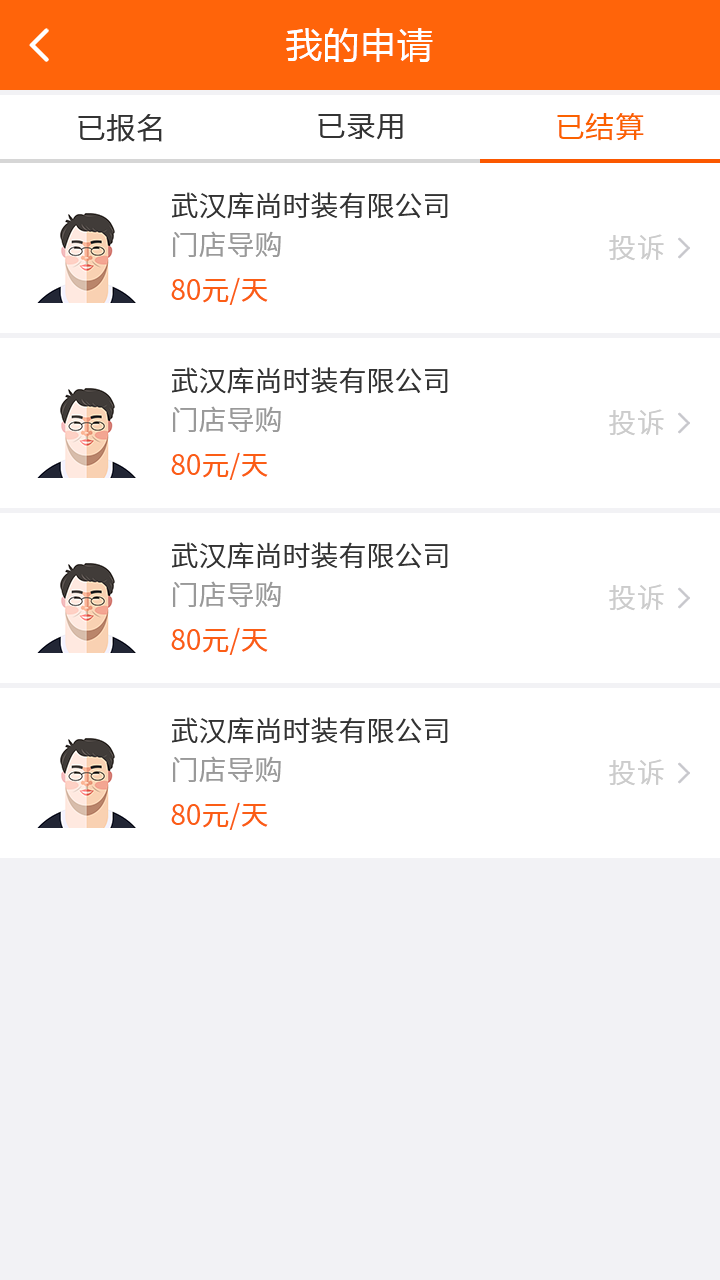
<style>
.page{position:relative;width:720px;height:1280px;background:#ffffff}
.page>*{position:absolute;margin:0}
.t1{font:36px "MicrosoftYaHei";letter-spacing:0.03em;color:#ffffff}
.t2{font:30px "NotoSansCJKsc-DemiLight";color:#333333;font-variant:small-caps}
.t3{font:30px "NotoSansCJKsc-DemiLight";color:#fb6100;font-variant:small-caps}
.t4{font:28px "NotoSansCJKsc-DemiLight";color:#333333;font-variant:small-caps}
.t5{font:28px "NotoSansCJKsc-DemiLight";color:#999999;font-variant:small-caps}
.t6{font:28px "NotoSansCJKsc-DemiLight";letter-spacing:0.03em;color:#cccccc;font-variant:small-caps}
.t7{font:28px "NotoSansCJKsc-Regular";color:#fb5d15;font-variant:small-caps}
</style>
<div class="page">
<p class="t1" style="left:286px;top:28px;width:147px;height:34px">我的申请</p>
<p class="t2" style="left:318px;top:113px;width:85px;height:27px">已录用</p>
<p class="t3" style="left:557px;top:113px;width:87px;height:28px">已结算</p>
<p class="t2" style="left:78px;top:114px;width:84px;height:28px">已报名</p>
<p class="t4" style="left:172px;top:192px;width:276px;height:27px">武汉库尚时装有限公司</p>
<p class="t5" style="left:173px;top:231px;width:108px;height:26px">门店导购</p>
<p class="t6" style="left:609px;top:234px;width:55px;height:27px">投诉</p>
<p class="t7" style="left:171px;top:277px;width:97px;height:28px">80元/天</p>
<p class="t4" style="left:172px;top:367px;width:276px;height:27px">武汉库尚时装有限公司</p>
<p class="t5" style="left:173px;top:406px;width:108px;height:26px">门店导购</p>
<p class="t6" style="left:609px;top:409px;width:55px;height:27px">投诉</p>
<p class="t7" style="left:171px;top:452px;width:97px;height:28px">80元/天</p>
<p class="t4" style="left:172px;top:542px;width:276px;height:27px">武汉库尚时装有限公司</p>
<p class="t5" style="left:173px;top:581px;width:108px;height:26px">门店导购</p>
<p class="t6" style="left:609px;top:584px;width:55px;height:27px">投诉</p>
<p class="t7" style="left:171px;top:627px;width:97px;height:28px">80元/天</p>
<p class="t4" style="left:172px;top:717px;width:276px;height:27px">武汉库尚时装有限公司</p>
<p class="t5" style="left:173px;top:756px;width:108px;height:26px">门店导购</p>
<p class="t6" style="left:609px;top:759px;width:55px;height:27px">投诉</p>
<p class="t7" style="left:171px;top:802px;width:97px;height:28px">80元/天</p>
</div>
